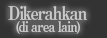
<style>
.page{position:relative;width:107px;height:38px;background:#333333}
.page>*{position:absolute;margin:0}
.t1{font:14px/12px "RyuminPro-ExBold";letter-spacing:-0.08em;color:#c9c9c9;scale:0.9 1}
.t2{font:18px/12px "RyuminPro-ExBold";letter-spacing:-0.08em;color:#c9c9c9;scale:0.9 1}
</style>
<div class="page">
<p class="t1" style="left:8px;top:6px;width:79px;height:28px"><span class="t2">Dikerahkan<br>  </span>(di area lain)</p>
</div>
